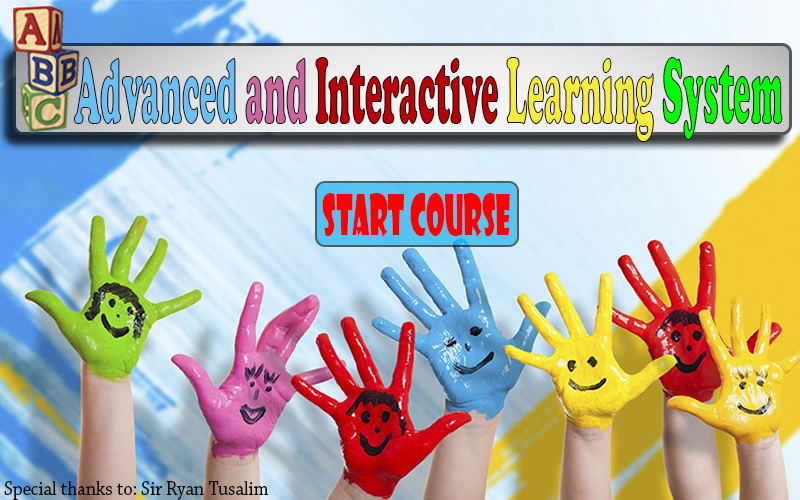
<style>
.page{position:relative;width:800px;height:500px}
.page>*{position:absolute;margin:0}
.t1{font:96.7px "CooperBlack";color:#b70105;scale:0.34 1}
.t2{font:96.7px "CooperBlack";color:#6cbff4;scale:0.34 1}
.t3{font:96.7px "CooperBlack";color:#cb66a1;scale:0.34 1}
.t4{font:96.7px "CooperBlack";color:#f7eb3b;scale:0.34 1}
.t5{font:96.7px "CooperBlack";color:#00ff00;scale:0.34 1}
.t6{font:54.8px "ShowcardGothic-Reg";color:#ff0000;scale:0.49 1}
.t7{font:20.3px "ChaparralPro-Regular";color:#050505;scale:0.91 1}
</style>
<div class="page">
<p class="t1" style="left:74px;top:57px;width:709px;height:85px"><span class="t2">Advanced </span><span class="t3">and </span>Interactive <span class="t4">Learning </span><span class="t5">System</span></p>
<p class="t6" style="left:322px;top:193px;width:188px;height:44px">START COURSE</p>
<p class="t7" style="left:4px;top:481px;width:265px;height:19px">Special thanks to: Sir Ryan Tusalim</p>
</div>
